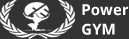
<style>
.page{position:relative;width:129px;height:39px;background:#333333}
.page>*{position:absolute;margin:0}
.t1{font:15px "OpenSans-Bold";color:#ffffff}
</style>
<div class="page">
<p class="t1" style="left:82px;top:4px;width:47px;height:31px">Power<br>GYM</p>
</div>
